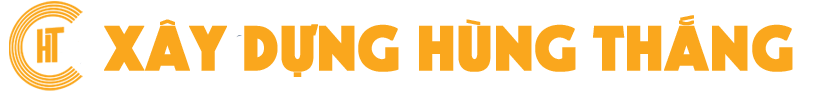
<style>
.page{position:relative;width:822px;height:92px;background:#ffffff}
.page>*{position:absolute;margin:0}
.t1{font:61.3px "UTM-Kabel-KT";color:#faa71d;font-weight:bold}
</style>
<div class="page">
<p class="t1" style="left:104px;top:15px;width:689px;height:62px">XÂY DỰNG HÙNG THẮNG</p>
</div>
